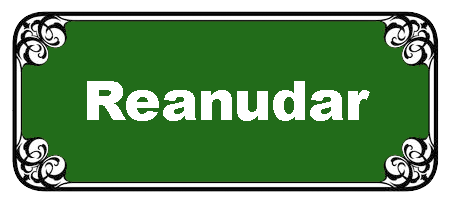
<style>
.page{position:relative;width:450px;height:205px;background:#226c1a}
.page>*{position:absolute;margin:0}
.t1{font:55px "Arial-Black";color:#ffffff}
</style>
<div class="page">
<p class="t1" style="left:87px;top:81px;width:283px;height:40px">Reanudar</p>
</div>
